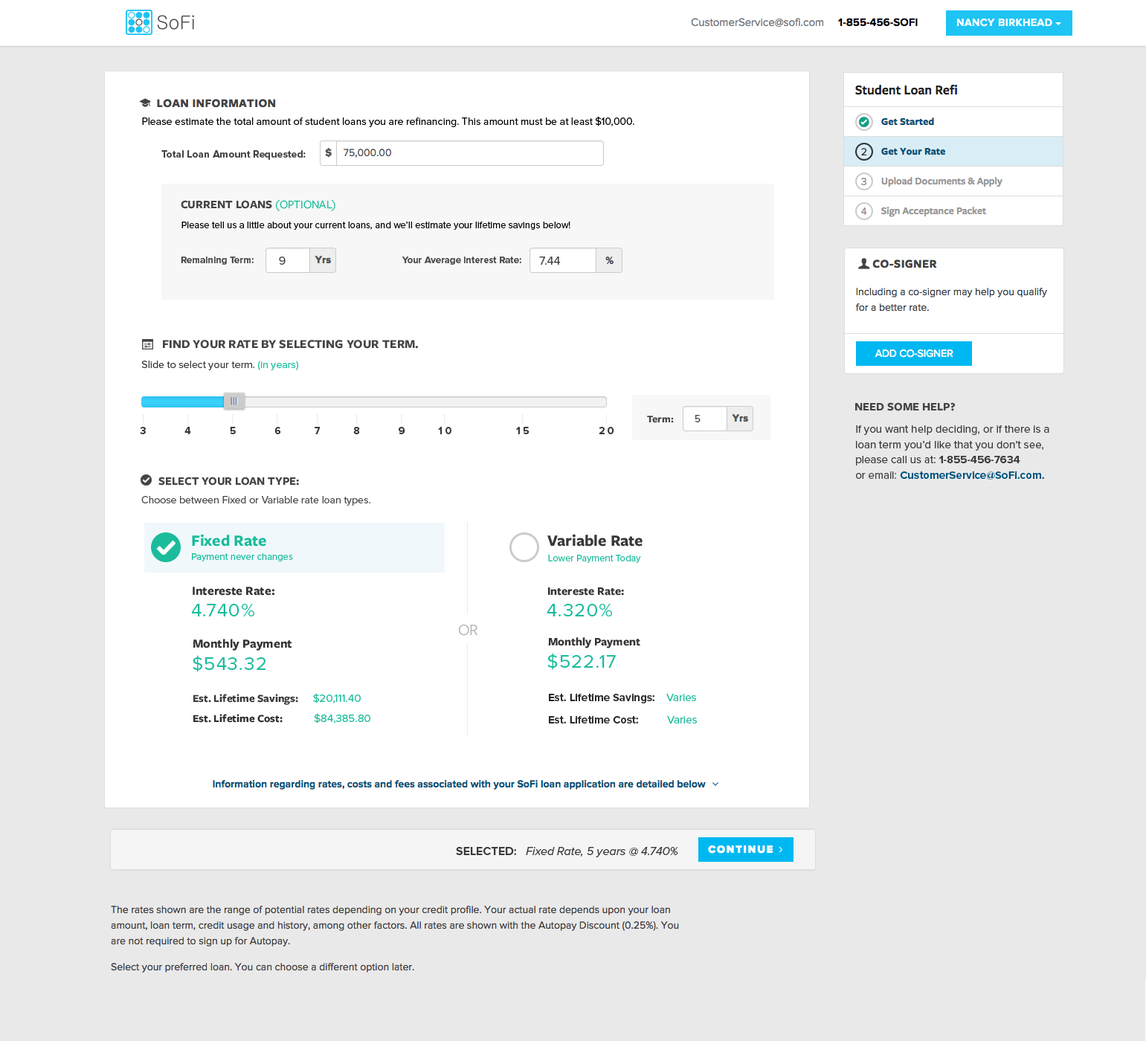
<style>
.page{position:relative;width:1146px;height:1041px;background:#eae9e9}
.page>*{position:absolute;margin:0}
.t1{font:10.4px "ProximaNova-Regular";color:#000000}
.t2{font:10.4px "ProximaNova-Bold";color:#444444}
.t3{font:11.9px "FreightSansProBold-Regular";color:#444444;text-transform:uppercase}
.t4{font:11.9px "FreightSansProBook-Regular";color:#1abc9c;text-transform:uppercase}
.t5{font:9.7px "ProximaNova-Regular";color:#000000}
.t6{font:9.7px "ProximaNova-Bold";color:#444444}
.t7{font:11.9px "ProximaNova-Regular";color:#444444}
.t8{font:12.6px "FreightSansProBold-Regular";color:#444444;text-transform:uppercase}
.t9{font:10.4px "ProximaNova-Regular";color:#383838}
.t10{font:10.4px "ProximaNova-Regular";color:#1abc9c}
.t11{font:10.4px "FreightSansProBold-Regular";color:#444444}
.t12{font:10.4px "ProximaNova-Regular";color:#444444}
.t13{font:11.2px/15.2px "ProximaNova-Regular";color:#3b3b3b}
.t14{font:11.2px/15.2px "ProximaNova-Bold";color:#3b3b3b}
.t15{font:11.2px/15.2px "ProximaNova-Regular";color:#444444}
.t16{font:11.2px/15.2px "ProximaNova-Bold";color:#005482}
.t17{font:10.4px "ProximaNova-Bold";letter-spacing:0.24em;color:#383838}
.t18{font:16.4px "FreightSansProBold-Regular";color:#1abc9c}
.t19{font:16.4px "FreightSansProBold-Regular";color:#383838}
.t20{font:9.7px "ProximaNova-Regular";color:#1abc9c}
.t21{font:12.7px "FreightSansProBold-Regular";color:#343434}
.t22{font:11.8px "FreightSansProBold-Regular";color:#343434}
.t23{font:19.1px "ProximaNova-Regular";letter-spacing:0.04em;color:#1abc9c}
.t24{font:16.4px "FreightSansProBook-Regular";color:#b6b6b6}
.t25{font:11.2px/19.7px "FreightSansProBold-Regular";color:#383838}
.t26{font:11.2px/19.7px "ProximaNova-Regular";color:#1abc9c}
.t27{font:11.2px/19.7px "FreightSansProBold-Regular";color:#2e2e2e}
.t28{font:11.2px/22.7px "ProximaNova-Bold";color:#2a2a2a}
.t29{font:11.2px/22.7px "ProximaNova-Regular";color:#1abc9c}
.t30{font:11.2px/22.7px "ProximaNova-Bold";color:#2e2e2e}
.t31{font:11.9px "ProximaNova-RegularIt";color:#3b3b3b}
.t32{font:11.9px "ProximaNova-Bold";color:#3b3b3b;text-transform:uppercase}
.t33{font:11.9px "ProximaNova-Bold";color:#3b3b3b}
</style>
<div class="page">
<p class="t1" style="left:142px;top:116px;width:492px;height:11px">Please estimate the total amount of student loans you are refinancing. This amount must be at least $10,000.</p>
<p class="t2" style="left:161px;top:150px;width:145px;height:10px">Total Loan Amount Requested:</p>
<p class="t3" style="left:181px;top:199px;width:154px;height:12px">current loans <span class="t4">(optional)</span></p>
<p class="t5" style="left:181px;top:222px;width:389px;height:8px">Please tell us a little about your current loans, and we’ll estimate your lifetime savings below!</p>
<p class="t6" style="left:181px;top:256px;width:73px;height:9px">Remaining Term:</p>
<p class="t7" style="left:279px;top:256px;width:6px;height:9px">9</p>
<p class="t6" style="left:401px;top:256px;width:120px;height:9px">Your Average interest Rate:</p>
<p class="t7" style="left:539px;top:256px;width:22px;height:9px">7.44</p>
<p class="t8" style="left:163px;top:340px;width:255px;height:9px">Find your rate by selecting your term.</p>
<p class="t9" style="left:141px;top:361px;width:157px;height:9px">Slide to select your term. <span class="t10">(in years)</span></p>
<p class="t3" style="left:855px;top:402px;width:100px;height:9px">need some help?</p>
<p class="t11" style="left:647px;top:416px;width:27px;height:7px">Term:</p>
<p class="t12" style="left:694px;top:415px;width:6px;height:7px">5</p>
<p class="t13" style="left:856px;top:425px;width:193px;height:55px">If you want help deciding, or if there is a loan term you’d like that you don’t see, please call us at: <span class="t14">1-855-456-7634</span> <br>or <span class="t15">email: </span><span class="t16">CustomerService@SoFi.com.</span></p>
<p class="t17" style="left:140px;top:427px;width:474px;height:7px">3       4       5       6      7      8       9      10            15             20</p>
<p class="t3" style="left:158px;top:477px;width:141px;height:8px">Select your loan type:</p>
<p class="t12" style="left:141px;top:496px;width:229px;height:10px">Choose between Fixed or Variable rate loan types.</p>
<p class="t18" style="left:192px;top:534px;width:74px;height:12px">Fixed Rate</p>
<p class="t19" style="left:547px;top:534px;width:95px;height:12px">Variable Rate</p>
<p class="t20" style="left:192px;top:553px;width:101px;height:8px">Payment never changes</p>
<p class="t20" style="left:548px;top:555px;width:93px;height:8px">Lower Payment Today</p>
<p class="t21" style="left:193px;top:587px;width:81px;height:9px">Intereste Rate:</p>
<p class="t22" style="left:548px;top:587px;width:76px;height:9px">Intereste Rate:</p>
<p class="t23" style="left:192px;top:604px;width:62px;height:12px">4.740%</p>
<p class="t23" style="left:546px;top:604px;width:66px;height:12px">4.320%</p>
<p class="t24" style="left:458px;top:624px;width:20px;height:12px">OR</p>
<p class="t21" style="left:193px;top:639px;width:98px;height:12px">Monthly Payment</p>
<p class="t22" style="left:548px;top:637px;width:92px;height:11px">Monthly Payment</p>
<p class="t23" style="left:547px;top:653px;width:69px;height:17px">$522.17</p>
<p class="t23" style="left:193px;top:655px;width:72px;height:17px">$543.32</p>
<p class="t25" style="left:193px;top:693px;width:177px;height:30px">Est. Lifetime Savings:     <span class="t26">$20,111.40<br></span><span class="t27">Est. Lifetime Cost:           </span><span class="t26">$84,385.80</span></p>
<p class="t28" style="left:549px;top:693px;width:148px;height:30px">Est. Lifetime Savings:    <span class="t29">Varies<br></span><span class="t30">Est. Lifetime Cost:          </span><span class="t29">Varies</span></p>
<p class="t31" style="left:456px;top:847px;width:222px;height:10px"><span class="t32">Selected</span><span class="t33">:   </span>Fixed Rate, 5 years @ 4.740%</p>
</div>
